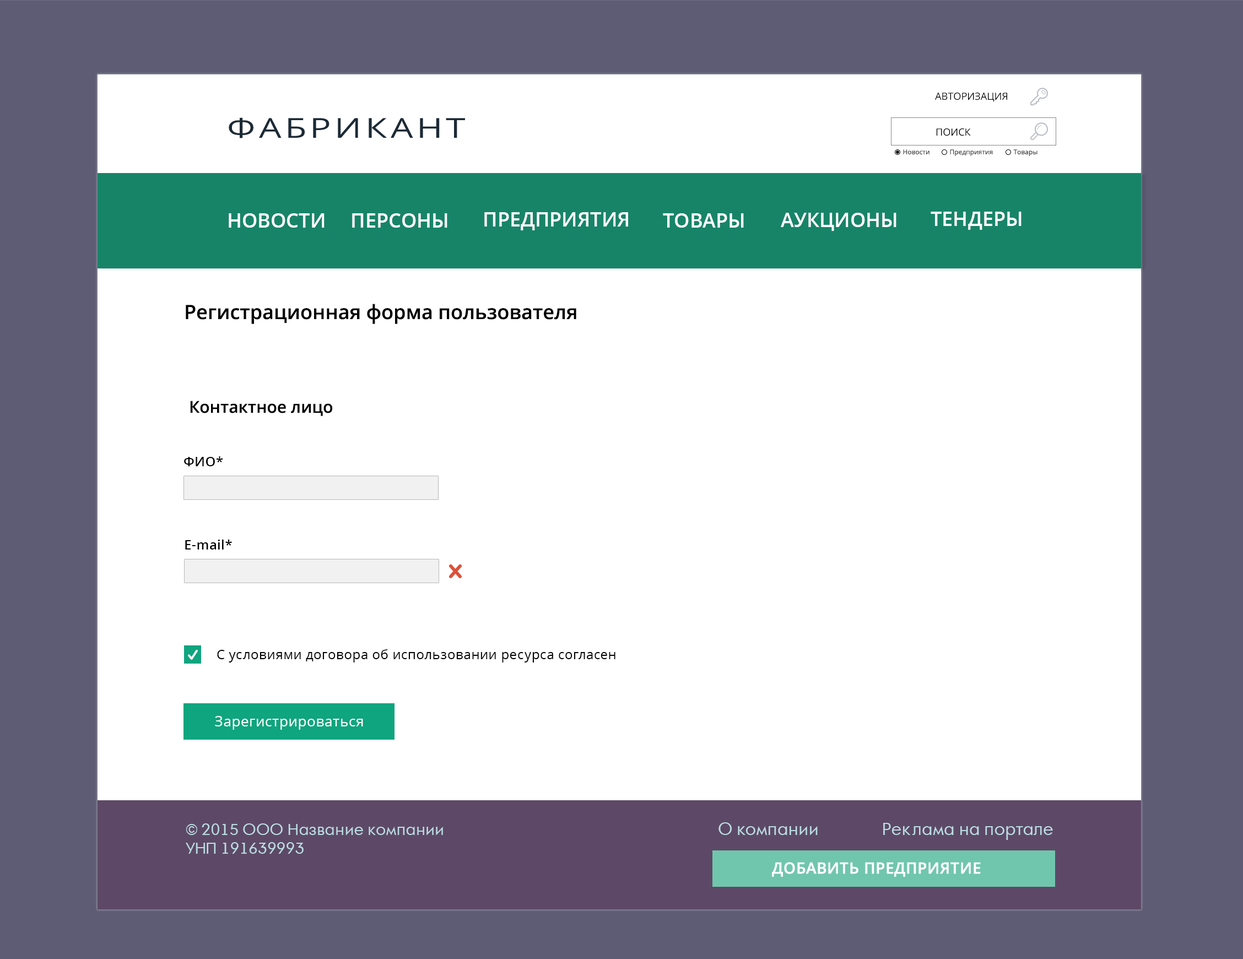
<style>
.page{position:relative;width:1243px;height:959px;background:#ffffff}
.page>*{position:absolute;margin:0}
.t1{font:9.9px "OpenSans";color:#000000;text-transform:uppercase}
.t2{font:27.6px "OpenSans";letter-spacing:0.1em;color:#1c2a36;scale:1.28 1}
.t3{font:6.6px "OpenSans";color:#404040}
.t4{font:19.8px "OpenSans-Semibold";color:#ffffff}
.t5{font:19.8px "OpenSans-Semibold";color:#000000}
.t6{font:16.5px "OpenSans-Semibold";color:#000000}
.t7{font:13.2px "OpenSans-Semibold";letter-spacing:0.025em;color:#010101}
.t8{font:13.2px "OpenSans";letter-spacing:0.025em;color:#010101}
.t9{font:14.3px "OpenSans";letter-spacing:0.025em;color:#fffefe}
.t10{font:15.4px "AFuturaOrto";color:#bbdde3}
.t11{font:16.5px "AFuturaOrto";color:#bbdde3}
.t12{font:15.4px "OpenSans-Semibold";color:#ffffff;font-weight:bold}
</style>
<div class="page">
<p class="t1" style="left:935px;top:93px;width:73px;height:9px">авторизация</p>
<p class="t2" style="left:229px;top:117px;width:236px;height:21px">ФАБРИКАНТ</p>
<p class="t1" style="left:936px;top:128px;width:35px;height:8px">поиск</p>
<p class="t3" style="left:903px;top:149px;width:27px;height:6px">Новости</p>
<p class="t3" style="left:950px;top:149px;width:43px;height:7px">Предприятия</p>
<p class="t3" style="left:1014px;top:149px;width:24px;height:7px">Товары</p>
<p class="t4" style="left:229px;top:213px;width:96px;height:15px">НОВОСТИ</p>
<p class="t4" style="left:352px;top:213px;width:96px;height:15px">ПЕРСОНЫ</p>
<p class="t4" style="left:484px;top:212px;width:144px;height:18px">ПРЕДПРИЯТИЯ</p>
<p class="t4" style="left:663px;top:213px;width:81px;height:15px">ТОВАРЫ</p>
<p class="t4" style="left:781px;top:213px;width:116px;height:18px">АУКЦИОНЫ</p>
<p class="t4" style="left:931px;top:212px;width:91px;height:18px">ТЕНДЕРЫ</p>
<p class="t5" style="left:186px;top:304px;width:391px;height:20px">Регистрационная форма пользователя</p>
<p class="t6" style="left:190px;top:401px;width:143px;height:15px">Контактное лицо</p>
<p class="t7" style="left:184px;top:456px;width:39px;height:10px">ФИО*</p>
<p class="t7" style="left:185px;top:540px;width:47px;height:10px">E-mail*</p>
<p class="t8" style="left:217px;top:649px;width:399px;height:13px">С условиями договора об использовании ресурса согласен</p>
<p class="t9" style="left:215px;top:716px;width:148px;height:14px">Зарегистрироваться</p>
<p class="t10" style="left:186px;top:823px;width:257px;height:31px">© 2015 ООО Название компании<br>УНП 191639993</p>
<p class="t11" style="left:719px;top:822px;width:99px;height:14px">О компании</p>
<p class="t11" style="left:883px;top:823px;width:170px;height:17px">Реклама на портале</p>
<p class="t12" style="left:772px;top:862px;width:209px;height:15px">ДОБАВИТЬ ПРЕДПРИЯТИЕ</p>
</div>
